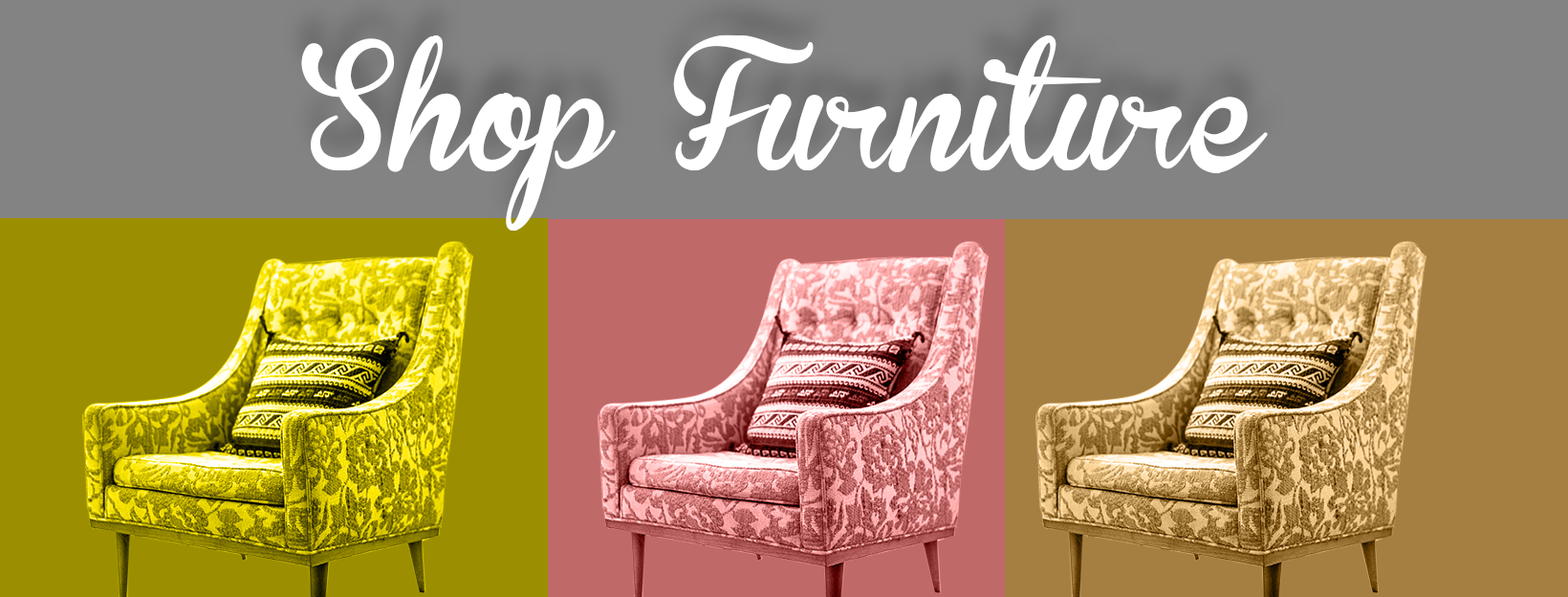
<style>
.page{position:relative;width:1568px;height:597px;background:#848383}
.page>*{position:absolute;margin:0}
.t1{font:124.3px "BrannbollFet";color:#ffffff}
</style>
<div class="page">
<p class="t1" style="left:301px;top:34px;width:967px;height:196px">Shop Furniture</p>
</div>
